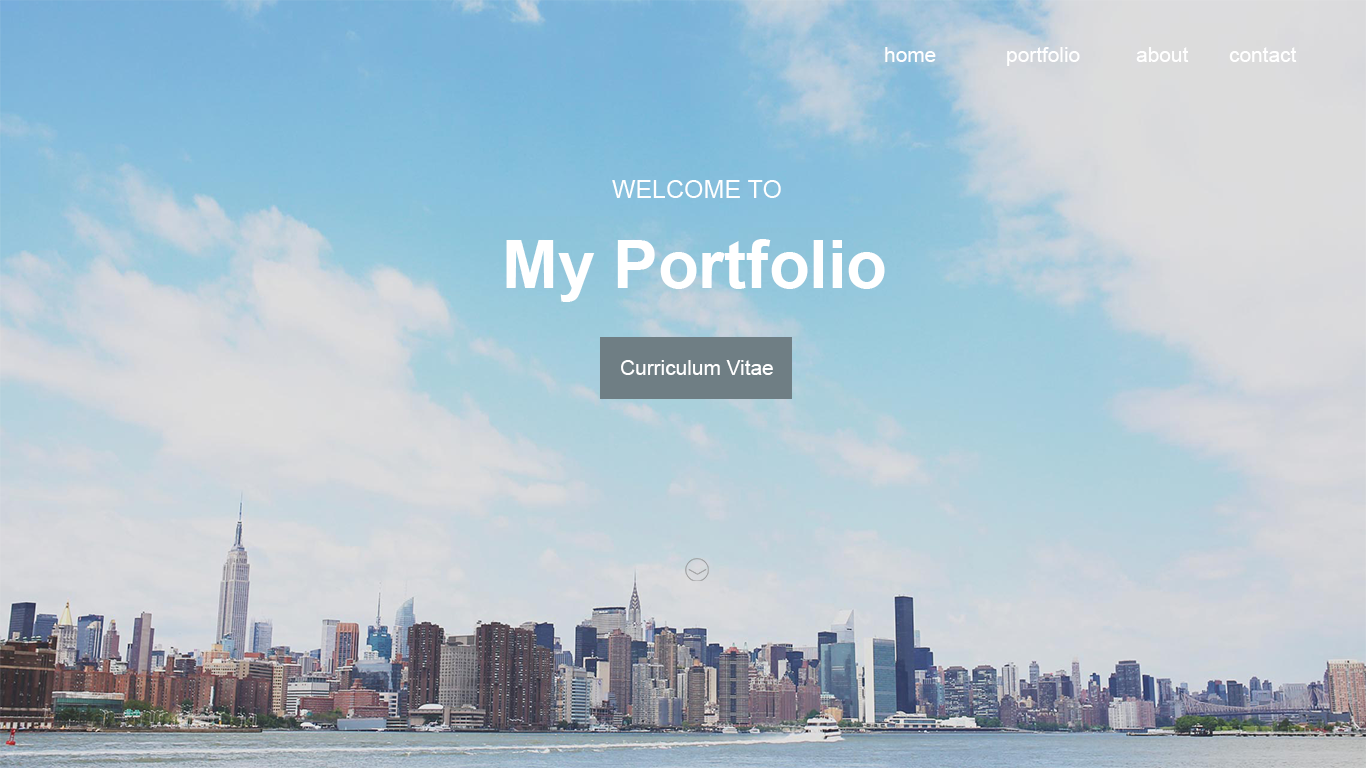
<style>
.page{position:relative;width:1366px;height:768px}
.page>*{position:absolute;margin:0}
.t1{font:20.8px "ArialMT";color:#ffffff}
.t2{font:25px "ArialMT";color:#ffffff}
.t3{font:66.7px "Arial-BoldMT";color:#ffffff}
</style>
<div class="page">
<p class="t1" style="left:885px;top:47px;width:412px;height:19px">contact  about  portfolio  home</p>
<p class="t2" style="left:612px;top:180px;width:169px;height:18px">WELCOME TO</p>
<p class="t3" style="left:506px;top:239px;width:379px;height:63px">My Portfolio</p>
<p class="t1" style="left:621px;top:360px;width:152px;height:15px">Curriculum Vitae</p>
</div>
